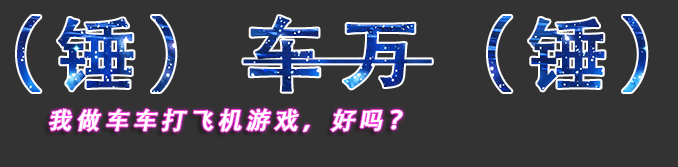
<style>
.page{position:relative;width:678px;height:167px;background:#333333}
.page>*{position:absolute;margin:0}
.t1{font:80px "AdobeHeitiStd-Regular";letter-spacing:0.15em;font-weight:bold}
.t2{font:24px "AdobeHeitiStd-Regular";letter-spacing:0.15em;color:#ffffff;font-weight:bold;font-style:italic}
</style>
<div class="page">
<p class="t1" style="left:17px;top:16px;width:630px;height:76px">(锤）车万（锤）</p>
<p class="t2" style="left:49px;top:108px;width:354px;height:24px">我做车车打飞机游戏，好吗？</p>
</div>
